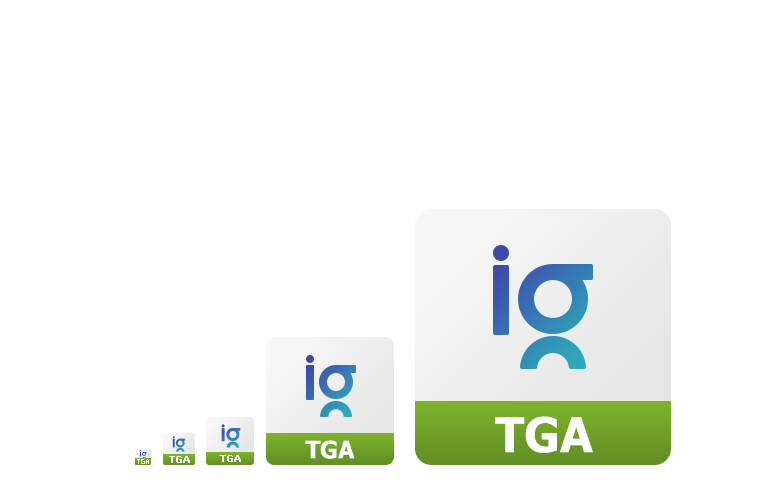
<style>
.page{position:relative;width:768px;height:480px;background:#ffffff}
.page>*{position:absolute;margin:0}
.t1{font:48px "Tahoma-Bold";color:#ffffff}
.t2{font:24px "Tahoma-Bold";color:#ffffff}
.t3{font:10px "Tahoma-Bold";color:#ffffff}
</style>
<div class="page">
<p class="t1" style="left:495px;top:416px;width:98px;height:37px">TGA</p>
<p class="t2" style="left:305px;top:440px;width:50px;height:19px">TGA</p>
<p class="t3" style="left:169px;top:456px;width:21px;height:7px">TGA</p>
<p class="t3" style="left:220px;top:455px;width:21px;height:7px">TGA</p>
</div>
